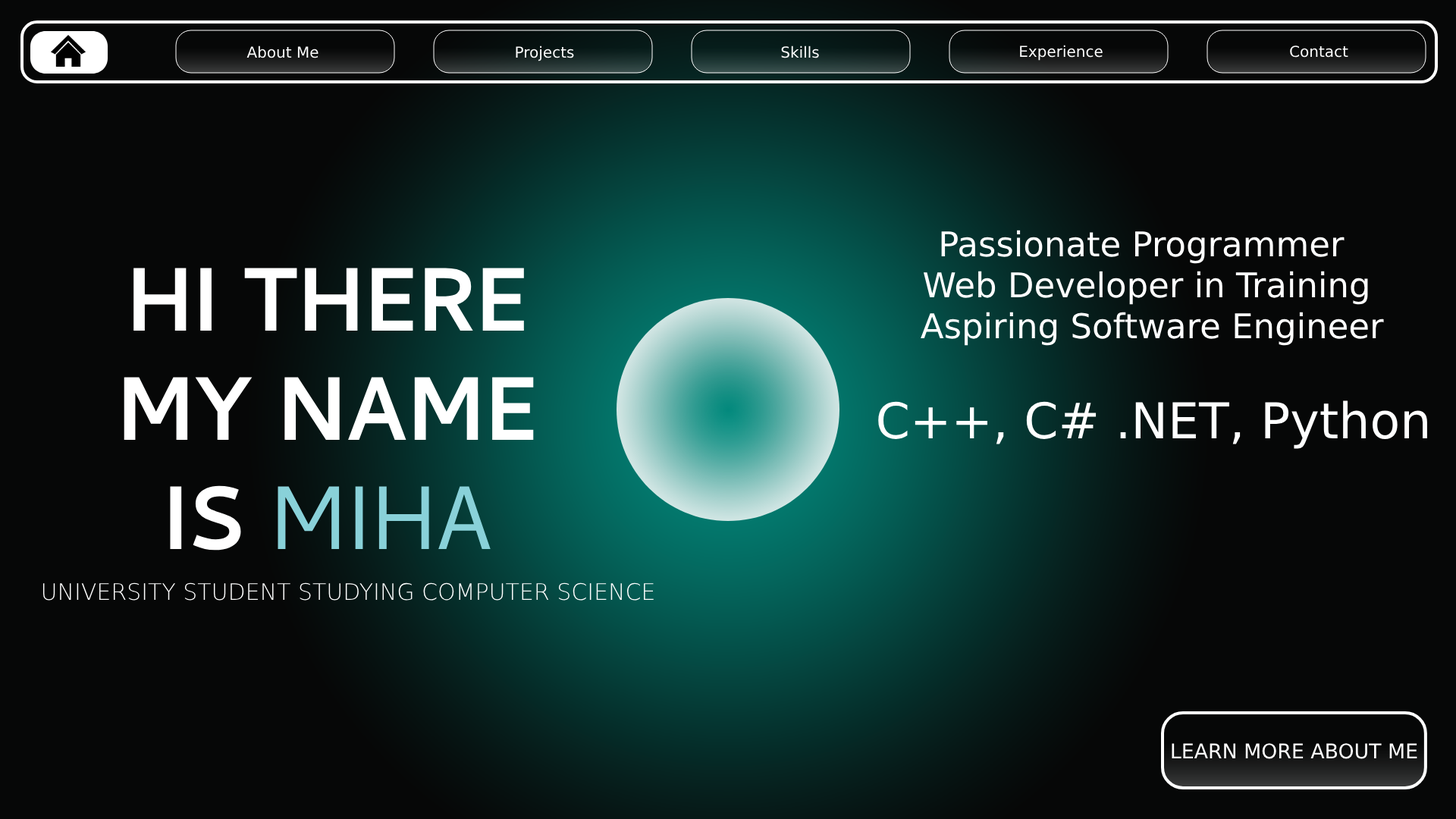
<style>
.page{position:relative;width:1456px;height:819px;background:#060707}
.page>*{position:absolute;margin:0}
.t1{font:15.2px "DejaVuSans";color:#ffffff}
.t2{font:34.1px "DejaVuSans";color:#ffffff}
.t3{font:91px "Cambay-Bold";color:#ffffff}
.t4{font:91px "Cambay-Regular";color:#89d1d9}
.t5{font:49.3px "DejaVuSans";color:#ffffff}
.t6{font:22.7px "DejaVuSans-ExtraLight";color:#ffffff}
.t7{font:20.3px "DejaVuSans";color:#ffffff}
</style>
<div class="page">
<p class="t1" style="left:246px;top:45px;width:72px;height:13px">About Me</p>
<p class="t1" style="left:516px;top:45px;width:58px;height:16px">Projects</p>
<p class="t1" style="left:781px;top:45px;width:38px;height:13px">Skills</p>
<p class="t1" style="left:1020px;top:45px;width:83px;height:16px">Experience</p>
<p class="t1" style="left:1290px;top:45px;width:58px;height:13px">Contact</p>
<p class="t2" style="left:921px;top:230px;width:463px;height:116px;text-align:center">Passionate Programmer <br> Web Developer in Training <br> Aspiring Software Engineer</p>
<p class="t3" style="left:124px;top:268px;width:410px;height:283px;text-align:center">HI THERE<br>MY NAME<br>IS <span class="t4">MIHA</span></p>
<p class="t5" style="left:878px;top:400px;width:549px;height:49px">C++, C# .NET, Python</p>
<p class="t6" style="left:42px;top:582px;width:612px;height:19px">UNIVERSITY STUDENT STUDYING COMPUTER SCIENCE</p>
<p class="t7" style="left:1172px;top:743px;width:245px;height:16px">LEARN MORE ABOUT ME</p>
</div>
